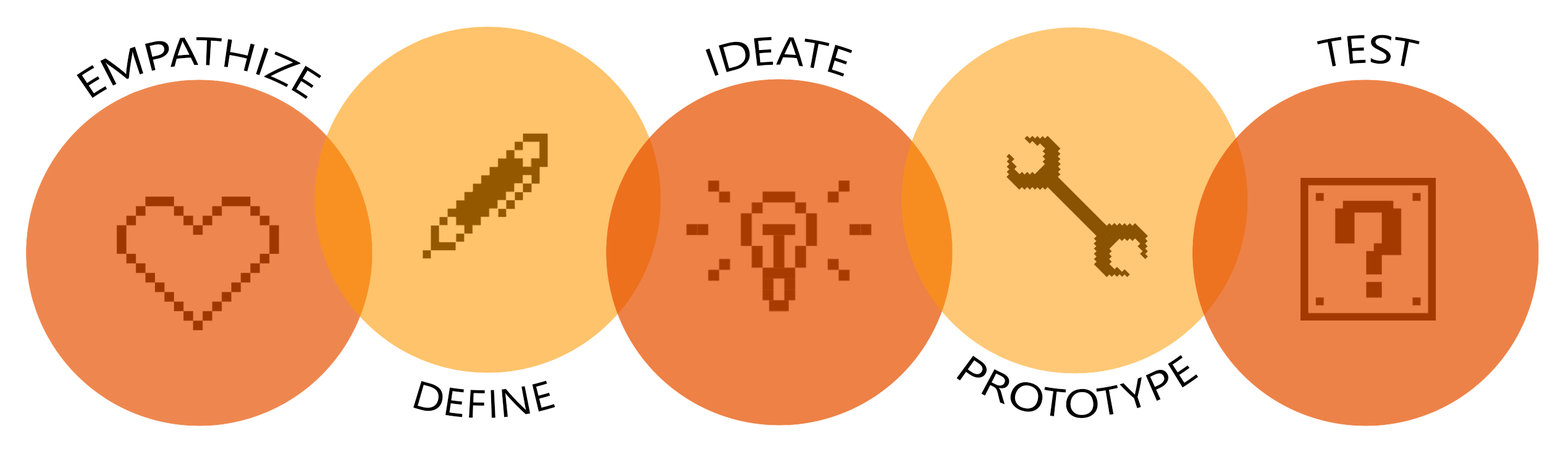
<style>
.page{position:relative;width:1568px;height:457px;background:#ffffff}
.page>*{position:absolute;margin:0}
.t1{font:39.6px "SegoeUI";color:#000000;text-transform:uppercase}
</style>
<div class="page">
<p class="t1" style="left:77px;top:37px;width:245px;height:62px">Empathize</p>
<p class="t1" style="left:706px;top:36px;width:147px;height:41px">IDEate</p>
<p class="t1" style="left:1317px;top:35px;width:103px;height:32px">Test</p>
<p class="t1" style="left:956px;top:355px;width:243px;height:63px">prototype</p>
<p class="t1" style="left:413px;top:381px;width:142px;height:37px">Define</p>
</div>
